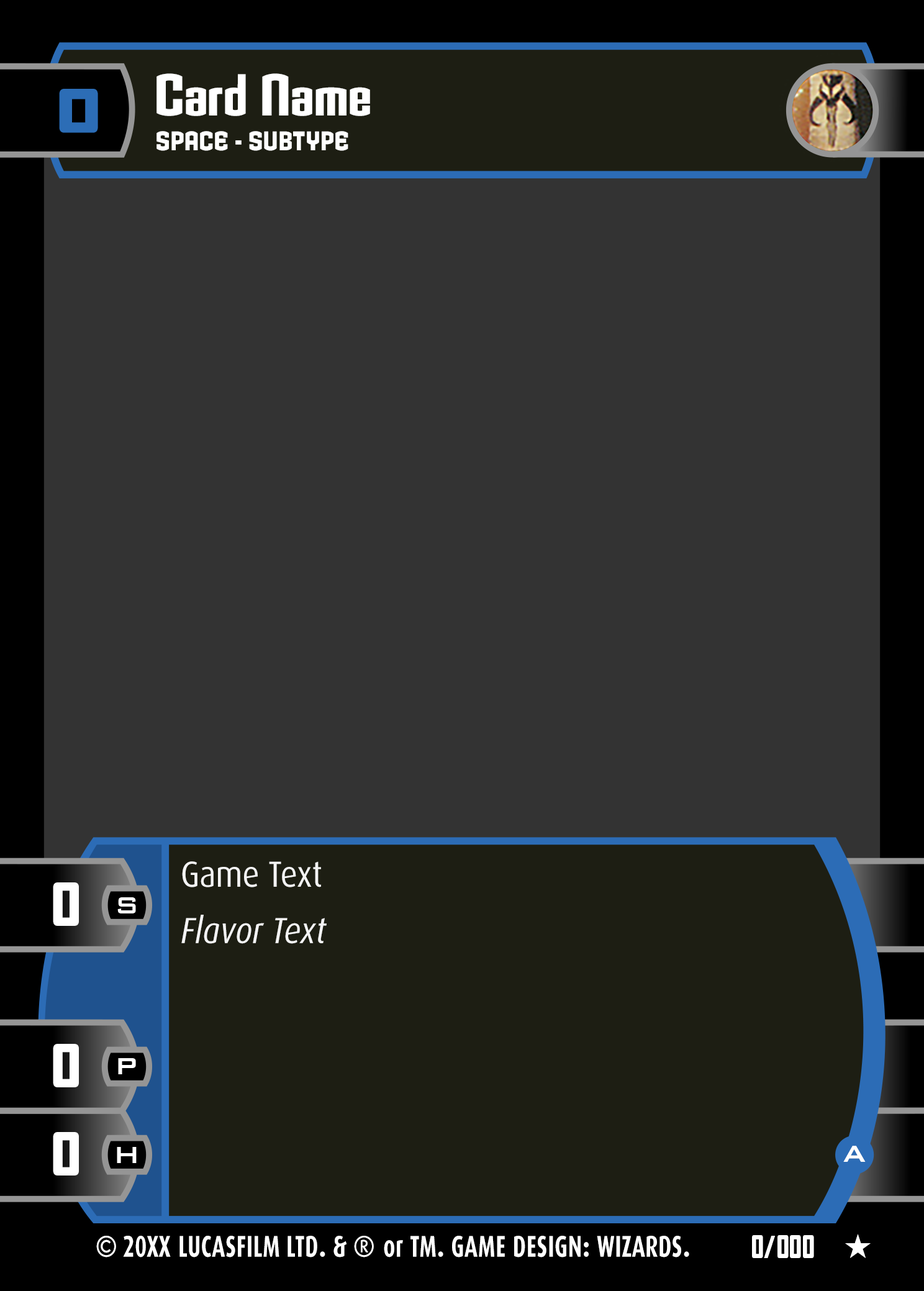
<style>
.page{position:relative;width:924px;height:1291px;background:#333333}
.page>*{position:absolute;margin:0}
.t1{font:57.5px "Armada-BoldCondensed";letter-spacing:0.005em;color:#ffffff}
.t2{font:57.1px "AgencyFB-BlackWide";letter-spacing:0.016em;color:#2c6db6;text-transform:uppercase}
.t3{font:26px "Armada-Bold";letter-spacing:0.02em;color:#ffffff;text-transform:uppercase;scale:0.69 1}
.t4{font:36.2px "Dax-Regular";color:#f4f4f4;scale:0.89 1}
.t5{font:56.9px "AgencyFBBlack";color:#ffffff;text-transform:uppercase}
.t6{font:36.2px "Dax-Italic";color:#f4f4f4;scale:0.89 1}
.t7{font:30.7px "BankGothicBT-Medium";color:#ffffff;text-transform:uppercase}
.t8{font:30.1px "Dax-Bold";letter-spacing:0.02em;color:#ffffff;scale:0.71 1}
.t9{font:30.1px "Dax-Bold";color:#ffffff;scale:0.9 1}
.t10{font:30.1px "Dax-Bold";color:#ffffff;scale:0.71 1}
.t11{font:30.1px "Dax-Bold";letter-spacing:0.02em;color:#ffffff;scale:0.9 1}
.t12{font:30.1px "Dax-Bold";letter-spacing:0.032em;color:#ffffff;scale:0.71 1}
.t13{font:29.5px "AgencyFBBlack";color:#ffffff;scale:0.82 1}
</style>
<div class="page">
<p class="t1" style="left:156px;top:73px;width:214px;height:43px">Card Name</p>
<p class="t2" style="left:59px;top:89px;width:39px;height:44px">0</p>
<p class="t3" style="left:156px;top:131px;width:192px;height:20px">Space - Subtype</p>
<p class="t4" style="left:182px;top:861px;width:139px;height:26px">Game Text</p>
<p class="t5" style="left:53px;top:882px;width:26px;height:44px">0</p>
<p class="t6" style="left:181px;top:915px;width:146px;height:29px">Flavor Text</p>
<p class="t5" style="left:53px;top:1044px;width:26px;height:43px">0</p>
<p class="t5" style="left:53px;top:1132px;width:26px;height:43px">0</p>
<p class="t7" style="left:843px;top:1145px;width:22px;height:17px">a</p>
<p class="t8" style="left:96px;top:1235px;width:593px;height:22px"><span class="t9">©</span><span class="t10"> 20XX </span>LUCASFILM LTD<span class="t11">.</span> &amp; <span class="t11">® </span>or TM<span class="t11">.</span> G<span class="t12">AME DES</span>IGN<span class="t11">:</span> WIZARDS<span class="t11">.</span></p>
<p class="t13" style="left:752px;top:1235px;width:62px;height:23px">0/000</p>
</div>
